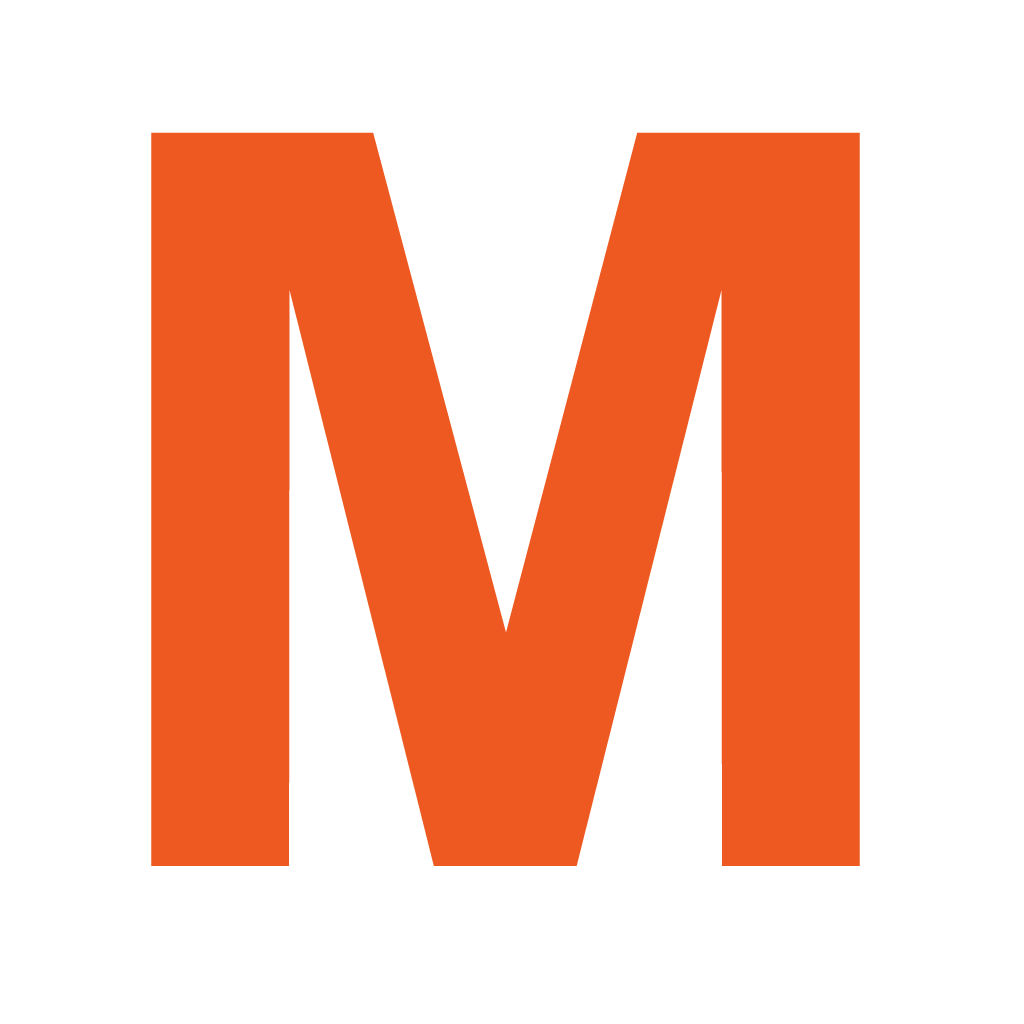
<style>
.page{position:relative;width:1024px;height:1024px;background:#ffffff}
.page>*{position:absolute;margin:0}
.t1{font:1024px "Arial-BoldMT";color:#ee5921}
</style>
<div class="page">
<p class="t1" style="left:151px;top:132px;width:709px;height:734px">M</p>
</div>
